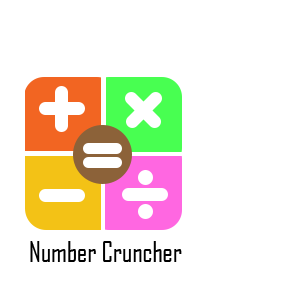
<style>
.page{position:relative;width:300px;height:300px;background:#ffffff}
.page>*{position:absolute;margin:0}
.t1{font:27.1px "AgencyFB-Reg";color:#000000}
</style>
<div class="page">
<p class="t1" style="left:30px;top:241px;width:152px;height:21px">Number Cruncher</p>
</div>
